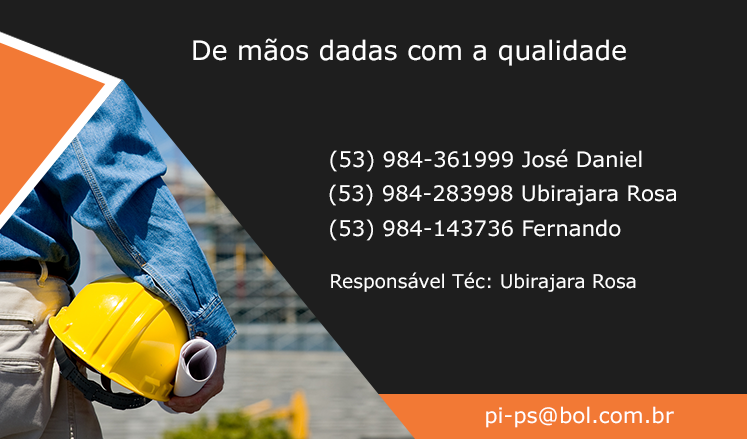
<style>
.page{position:relative;width:747px;height:439px;background:#1e1e1e}
.page>*{position:absolute;margin:0}
.t1{font:26.7px "Verdana";color:#ffffff}
.t2{font:21.3px "Verdana";color:#ffffff}
.t3{font:18.7px "Verdana";color:#ffffff}
</style>
<div class="page">
<p class="t1" style="left:193px;top:38px;width:433px;height:28px">De mãos dadas com a qualidade</p>
<p class="t2" style="left:330px;top:149px;width:312px;height:23px">(53) 984-361999 José Daniel</p>
<p class="t2" style="left:329px;top:184px;width:347px;height:22px">(53) 984-283998 Ubirajara Rosa</p>
<p class="t2" style="left:330px;top:219px;width:291px;height:22px">(53) 984-143736 Fernando</p>
<p class="t3" style="left:331px;top:272px;width:305px;height:20px">Responsável Téc: Ubirajara Rosa</p>
<p class="t2" style="left:486px;top:406px;width:188px;height:22px">pi-ps@bol.com.br</p>
</div>
